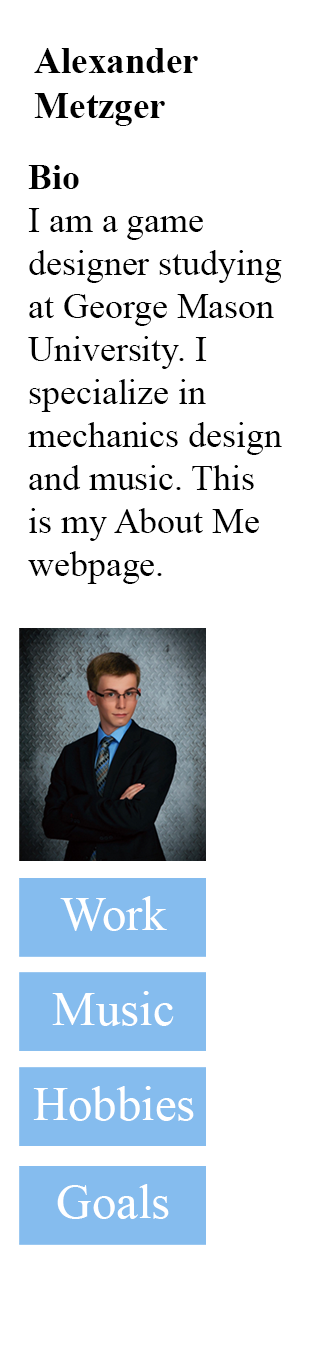
<style>
.page{position:relative;width:320px;height:1350px;background:#ffffff}
.page>*{position:absolute;margin:0}
.t1{font:36.9px "TimesNewRomanPS-BoldMT";color:#000000}
.t2{font:35.8px "TimesNewRomanPSMT";color:#000000}
.t3{font:35.8px "TimesNewRomanPS-BoldMT";color:#000000}
.t4{font:48.9px "TimesNewRomanPSMT";color:#ffffff}
</style>
<div class="page">
<p class="t1" style="left:34px;top:48px;width:164px;height:78px">Alexander <br>Metzger</p>
<p class="t2" style="left:28px;top:165px;width:254px;height:419px"><span class="t3">Bio<br></span>I am a game designer studying at George Mason University. I specialize in mechanics design and music. This is my About Me webpage.</p>
<p class="t4" style="left:60px;top:896px;width:107px;height:35px">Work</p>
<p class="t4" style="left:52px;top:991px;width:122px;height:35px">Music</p>
<p class="t4" style="left:33px;top:1086px;width:161px;height:35px">Hobbies</p>
<p class="t4" style="left:57px;top:1184px;width:112px;height:35px">Goals</p>
</div>
